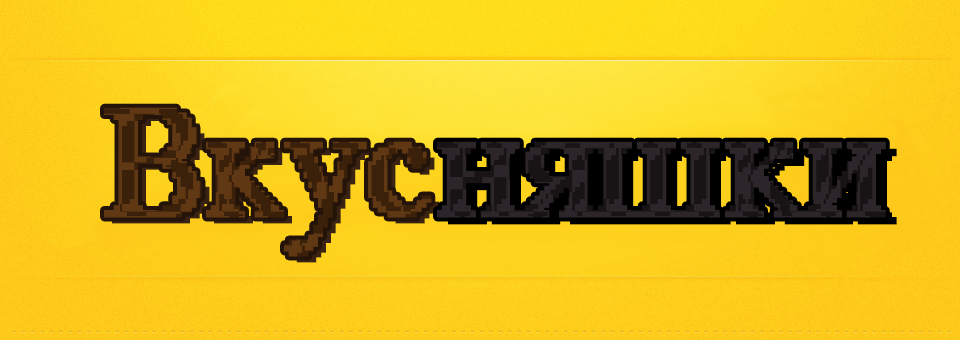
<style>
.page{position:relative;width:960px;height:340px}
.page>*{position:absolute;margin:0}
.t1{font:156px "MS Serif";font-weight:bold}
.t2{font:156px "MS Serif";color:#3a2313;font-weight:bold}
.t3{font:156px "MS Serif";color:#2c262a;font-weight:bold}
.t4{font:156px "MS Serif";color:#000000;font-weight:bold}
</style>
<div class="page">
<p class="t1" style="left:104px;top:107px;width:328px;height:150px">Вкус</p>
<p class="t2" style="left:112px;top:113px;width:328px;height:150px">Вкус</p>
<p class="t3" style="left:437px;top:141px;width:449px;height:77px">няшки</p>
<p class="t4" style="left:448px;top:148px;width:449px;height:77px">няшки</p>
</div>
